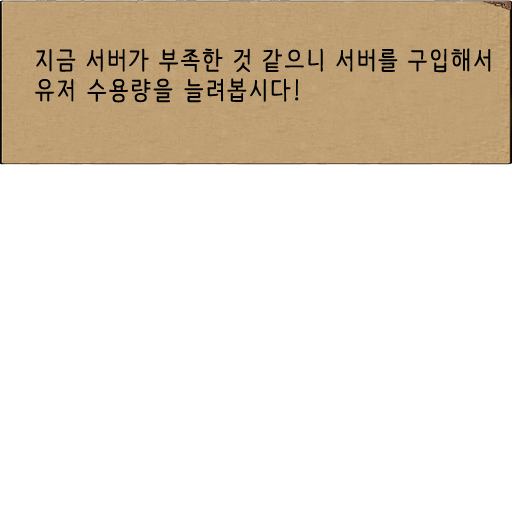
<style>
.page{position:relative;width:512px;height:512px;background:#ffffff}
.page>*{position:absolute;margin:0}
.t1{font:25px "NanumBarunpen";letter-spacing:0.075em;color:#000000;font-weight:bold}
</style>
<div class="page">
<p class="t1" style="left:35px;top:48px;width:456px;height:55px;text-align:justify">지금 서버가 부족한 것 같으니 서버를 구입해서 유저 수용량을 늘려봅시다!</p>
</div>
